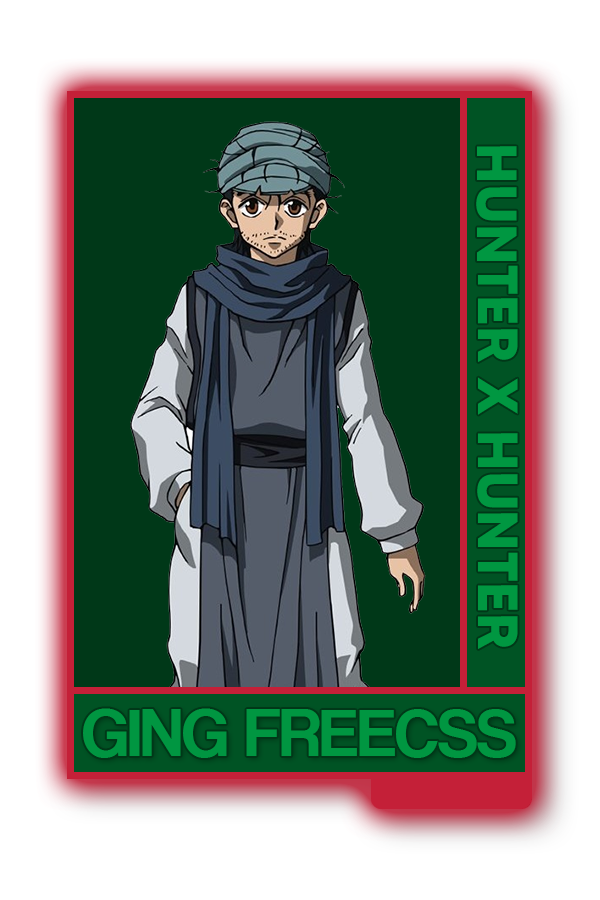
<style>
.page{position:relative;width:600px;height:900px;background:#003818}
.page>*{position:absolute;margin:0}
.t1{font:56.5px "MADETOMMY-Bold";color:#009741}
.t2{font:69.8px "CoolveticaRg-Regular";color:#009641}
</style>
<div class="page">
<p class="t1" style="left:476px;top:146px;width:42px;height:503px;rotate:90deg">HUNTER X HUNTER</p>
<p class="t2" style="left:83px;top:708px;width:433px;height:50px">GING FREECSS</p>
</div>
